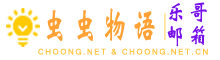
<style>
.page{position:relative;width:220px;height:60px;background:#ffffff}
.page>*{position:absolute;margin:0}
.t1{font:23px "STXinwei";letter-spacing:0.2em;color:#7810eb;text-transform:uppercase;scale:0.85 1}
.t2{font:41.2px "STXinwei";letter-spacing:0.2em;color:#ffa134;text-transform:uppercase;scale:0.62 1}
.t3{font:28.1px "STXinwei";letter-spacing:0.2em;text-transform:uppercase;scale:0.57 1}
.t4{font:8px "MicrosoftSansSerif";letter-spacing:0.2em;color:#ffc340;text-transform:uppercase}
</style>
<div class="page">
<p class="t1" style="left:169px;top:2px;width:38px;height:21px">乐哥</p>
<p class="t2" style="left:47px;top:8px;width:108px;height:34px">虫虫物语</p>
<p class="t3" style="left:164px;top:13px;width:2px;height:28px">|</p>
<p class="t1" style="left:167px;top:25px;width:38px;height:22px">邮箱</p>
<p class="t4" style="left:38px;top:48px;width:170px;height:7px">choong.net &amp; choong.net.cn</p>
</div>
